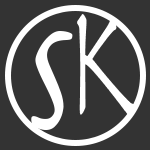
<style>
.page{position:relative;width:150px;height:150px;background:#333333}
.page>*{position:absolute;margin:0}
.t1{font:163.8px "Herculanum";color:#ffffff;scale:0.52 1}
.t2{font:152.4px "Herculanum";color:#ffffff}
</style>
<div class="page">
<p class="t1" style="left:77px;top:14px;width:59px;height:103px">K</p>
<p class="t2" style="left:31px;top:31px;width:42px;height:99px">S</p>
</div>
